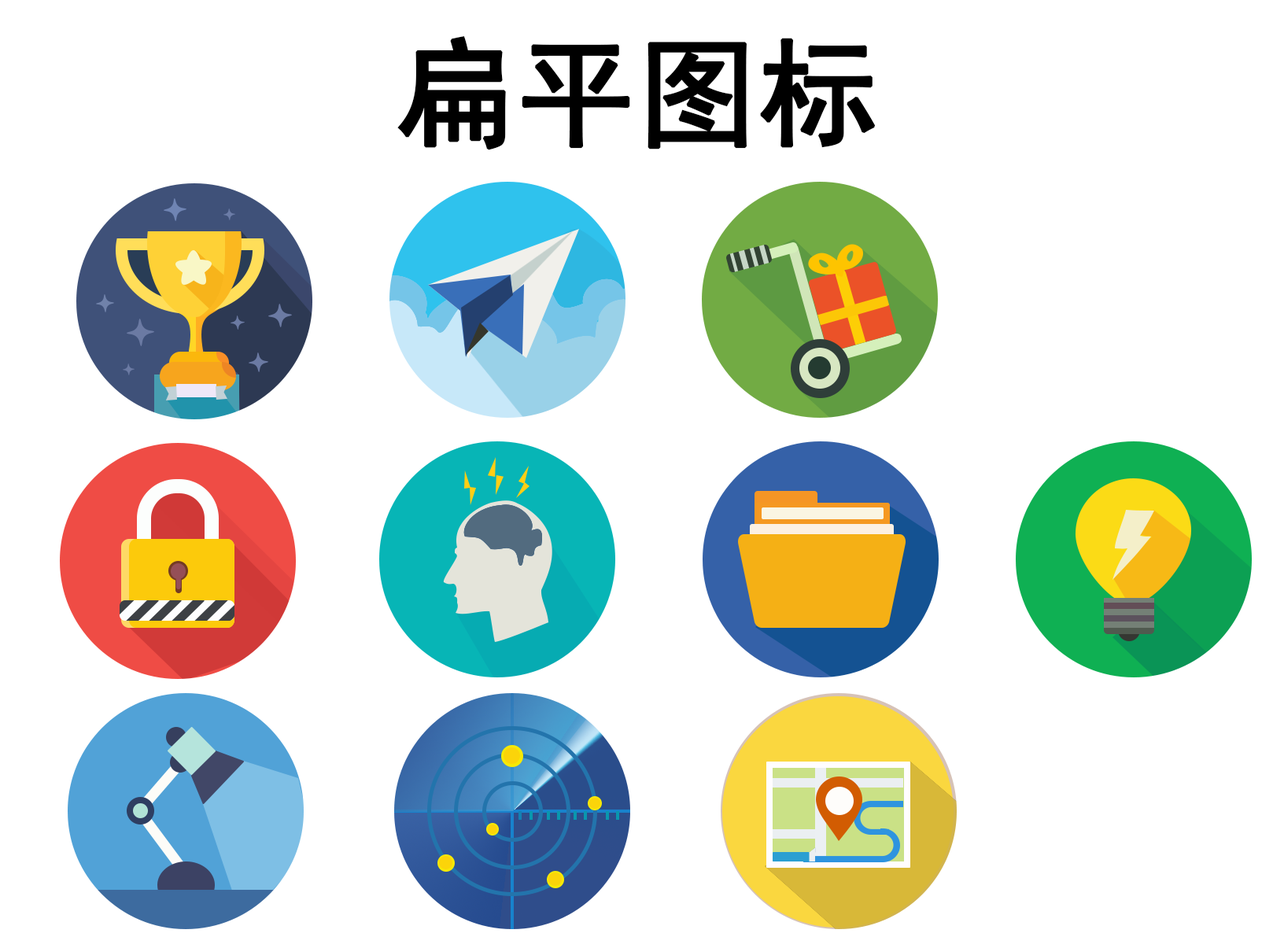
<style>
.page{position:relative;width:1273px;height:937px;background:#ffffff}
.page>*{position:absolute;margin:0}
.t1{font:118px "SimHei";color:#000000;font-weight:bold}
</style>
<div class="page">
<p class="t1" style="left:397px;top:36px;width:479px;height:114px">扁平图标</p>
</div>
